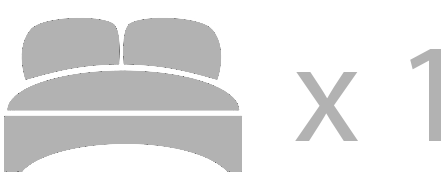
<style>
.page{position:relative;width:442px;height:190px;background:#ffffff}
.page>*{position:absolute;margin:0}
.t1{font:141.9px "MyriadPro-Regular";letter-spacing:0.02em;color:#b2b2b2}
</style>
<div class="page">
<p class="t1" style="left:295px;top:49px;width:146px;height:92px">x 1</p>
</div>
